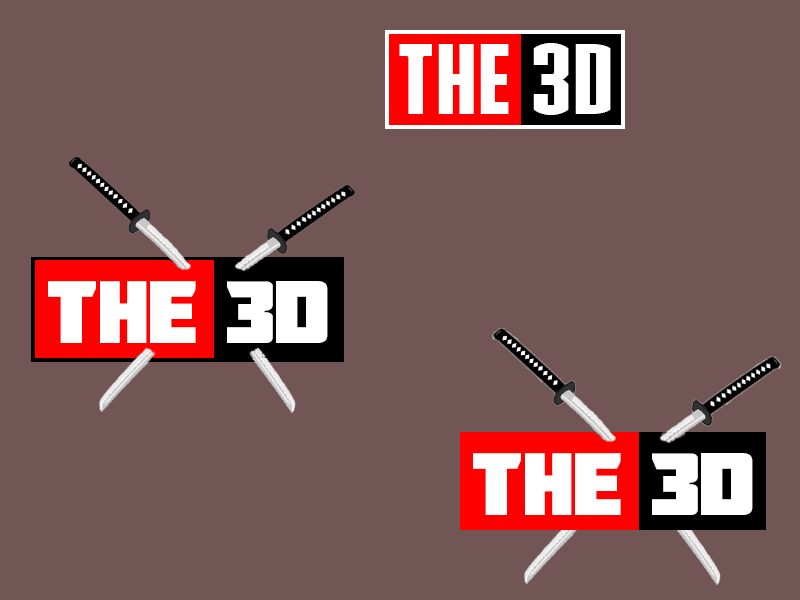
<style>
.page{position:relative;width:800px;height:600px;background:#725656}
.page>*{position:absolute;margin:0}
.t1{font:73.7px "DeadpoolMovieRUSBYLYAJKA";color:#ffffff}
</style>
<div class="page">
<p class="t1" style="left:48px;top:281px;width:148px;height:62px">THE</p>
<p class="t1" style="left:227px;top:281px;width:101px;height:62px">3D</p>
<p class="t1" style="left:473px;top:453px;width:148px;height:62px">THE</p>
<p class="t1" style="left:652px;top:453px;width:101px;height:62px">3D</p>
</div>
